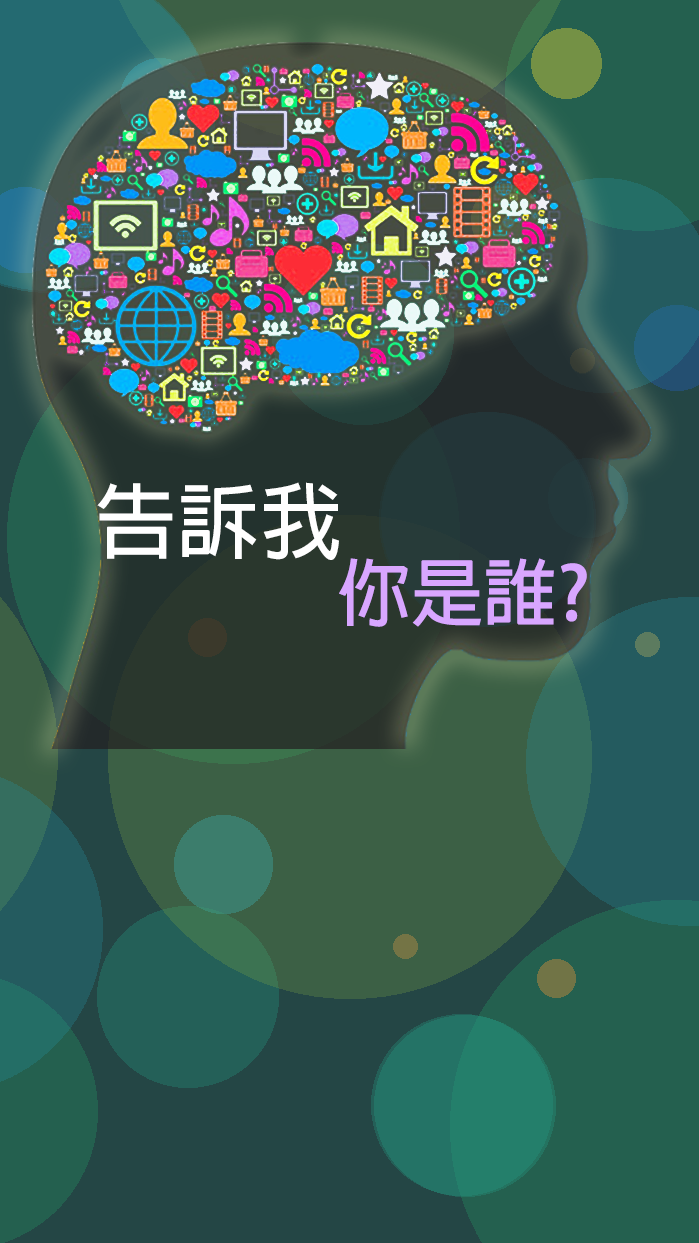
<style>
.page{position:relative;width:699px;height:1243px}
.page>*{position:absolute;margin:0}
.t1{font:82.5px "AdobeFanHeitiStd-Bold";color:#ffffff}
.t2{font:73.5px "AdobeFanHeitiStd-Bold";color:#d8a6ff}
</style>
<div class="page">
<p class="t1" style="left:97px;top:482px;width:242px;height:78px">告訴我</p>
<p class="t2" style="left:339px;top:558px;width:248px;height:69px">你是誰?</p>
</div>
